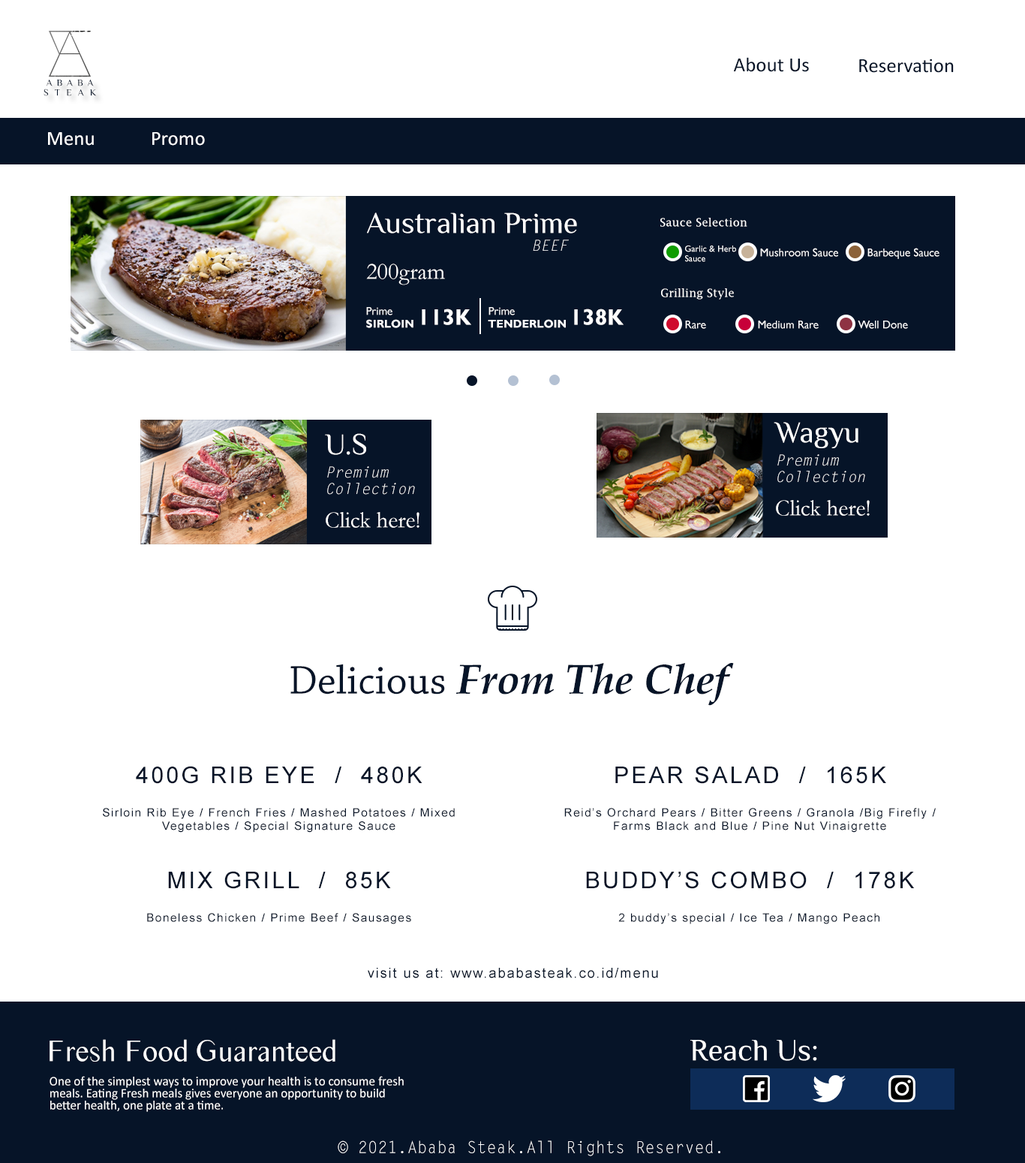
<style>
.page{position:relative;width:1025px;height:1163px;background:#ffffff}
.page>*{position:absolute;margin:0}
.t1{font:20.3px "Calibri";color:#061428}
.t2{font:9.3px/9.8px "Philosopher-Regular";letter-spacing:0.48em;color:#061428}
.t3{font:9.3px/9.8px "Philosopher-Regular";letter-spacing:0.66em;color:#061428}
.t4{font:20.3px "Calibri";color:#ffffff}
.t5{font:30px "Philosopher-Regular";color:#ffffff}
.t6{font:11.3px "LucidaFax";color:#ffffff}
.t7{font:15px "LetterGothicStd-Slanted";color:#ffffff}
.t8{font:9px/9.8px "GillSansMT";color:#ffffff}
.t9{font:11.3px/12.8px "GillSansMT";color:#ffffff}
.t10{font:11.3px "GillSansMT";color:#ffffff}
.t11{font:23.3px "Garamond";color:#ffffff}
.t12{font:11.3px/12.8px "GillSansMT-Bold";color:#ffffff}
.t13{font:22.5px "GillSansMT-Bold";color:#ffffff}
.t14{font:15px/16.5px "LetterGothicStd-Slanted";color:#ffffff}
.t15{font:42px "BookAntiqua-BoldItalic";color:#061428}
.t16{font:42px "ChaparralPro-Regular";color:#061428}
.t17{font:11.5px/13.3px "ArialMT";letter-spacing:0.1em;color:#061428}
.t18{font:23.1px/20.2px "ArialMT";letter-spacing:0.1em;color:#061428}
.t19{font:13.8px "ArialMT";letter-spacing:0.1em;color:#061428}
.t20{font:30.8px "TimesSansSerif";color:#ffffff}
.t21{font:30.8px "Philosopher-Regular";color:#ffffff}
.t22{font:12.8px/12px "Calibri";color:#ffffff}
.t23{font:16.5px "LetterGothicStd";color:#ffffff}
</style>
<div class="page">
<p class="t1" style="left:734px;top:57px;width:75px;height:15px">About Us</p>
<p class="t1" style="left:860px;top:59px;width:94px;height:14px">Reservation</p>
<p class="t2" style="left:44px;top:80px;width:53px;height:16px;text-align:center">ABABA<br><span class="t3">STEAK</span></p>
<p class="t4" style="left:48px;top:132px;width:46px;height:14px">Menu</p>
<p class="t4" style="left:152px;top:132px;width:53px;height:14px">Promo</p>
<p class="t5" style="left:367px;top:212px;width:210px;height:21px">Australian Prime</p>
<p class="t6" style="left:661px;top:218px;width:87px;height:9px">Sauce Selection</p>
<p class="t7" style="left:533px;top:239px;width:36px;height:12px">BEEF</p>
<p class="t8" style="left:685px;top:245px;width:51px;height:17px">Garlic &amp; Herb<br>Sauce</p>
<p class="t9" style="left:760px;top:248px;width:79px;height:9px">Mushroom Sauce<br>Sauce</p>
<p class="t10" style="left:868px;top:248px;width:72px;height:11px">Barbeque Sauce  SauBarbeque</p>
<p class="t11" style="left:366px;top:263px;width:79px;height:22px">200gram</p>
<p class="t6" style="left:661px;top:288px;width:73px;height:12px">Grilling Style</p>
<p class="t12" style="left:366px;top:307px;width:48px;height:21px"><span class="t9">Prime<br></span>SIRLOIN</p>
<p class="t13" style="left:422px;top:309px;width:49px;height:16px">113K</p>
<p class="t12" style="left:488px;top:307px;width:78px;height:21px"><span class="t9">Prime<br></span>TENDERLOIN</p>
<p class="t13" style="left:574px;top:309px;width:50px;height:16px">138K</p>
<p class="t10" style="left:685px;top:321px;width:21px;height:8px">Rare</p>
<p class="t10" style="left:758px;top:321px;width:61px;height:8px">Medium Rare</p>
<p class="t10" style="left:858px;top:321px;width:50px;height:8px">Well Done</p>
<p class="t5" style="left:774px;top:422px;width:85px;height:26px">Wagyu</p>
<p class="t5" style="left:325px;top:433px;width:41px;height:22px">U.S</p>
<p class="t14" style="left:778px;top:454px;width:88px;height:29px">Premium<br>Collection</p>
<p class="t14" style="left:327px;top:466px;width:88px;height:29px">Premium<br>Collection</p>
<p class="t11" style="left:776px;top:500px;width:94px;height:16px">Click here!</p>
<p class="t11" style="left:326px;top:512px;width:94px;height:16px">Click here!</p>
<p class="t15" style="left:291px;top:663px;width:443px;height:43px"><span class="t16">Delicious </span>From The Chef</p>
<p class="t17" style="left:103px;top:766px;width:352px;height:67px;text-align:center"><span class="t18">400G RIB EYE  /  480K<br><br></span>Sirloin Rib Eye / French Fries / Mashed Potatoes / Mixed Vegetables / Special Signature Sauce</p>
<p class="t17" style="left:565px;top:766px;width:371px;height:67px;text-align:center"><span class="t18">PEAR SALAD  /  165K<br><br></span>Reid’s Orchard Pears / Bitter Greens / Granola /Big Firefly / Farms Black and Blue / Pine Nut Vinaigrette</p>
<p class="t17" style="left:147px;top:871px;width:264px;height:53px;text-align:center"><span class="t18">MIX GRILL  /  85K<br><br></span>Boneless Chicken / Prime Beef / Sausages</p>
<p class="t17" style="left:586px;top:871px;width:329px;height:53px;text-align:center"><span class="t18">BUDDY’S COMBO  /  178K<br><br></span>2 buddy’s special / Ice Tea / Mango Peach</p>
<p class="t19" style="left:368px;top:968px;width:290px;height:10px">visit us at: www.ababasteak.co.id/menu</p>
<p class="t20" style="left:50px;top:1039px;width:286px;height:22px">Fresh Food Guaranteed</p>
<p class="t21" style="left:691px;top:1040px;width:127px;height:21px">Reach Us:</p>
<p class="t22" style="left:50px;top:1076px;width:354px;height:36px">One of the simplest ways to improve your health is to consume fresh meals. Eating Fresh meals gives everyone an opportunity to build better health, one plate at a time.</p>
<p class="t23" style="left:338px;top:1140px;width:383px;height:16px">© 2021.Ababa Steak.All Rights Reserved.</p>
</div>
